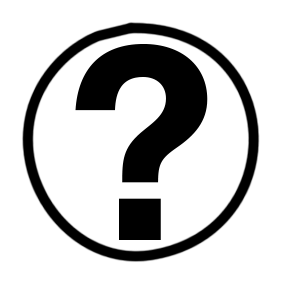
<style>
.page{position:relative;width:284px;height:283px;background:#ffffff}
.page>*{position:absolute;margin:0}
.t1{font:270px "HelveticaNeueCyr-Bold";color:#000000}
</style>
<div class="page">
<p class="t1" style="left:75px;top:44px;width:133px;height:196px">?</p>
</div>
